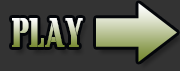
<style>
.page{position:relative;width:180px;height:71px;background:#333333}
.page>*{position:absolute;margin:0}
.t1{font:30px "CargoCrate"}
</style>
<div class="page">
<p class="t1" style="left:12px;top:18px;width:71px;height:29px">Play</p>
</div>
